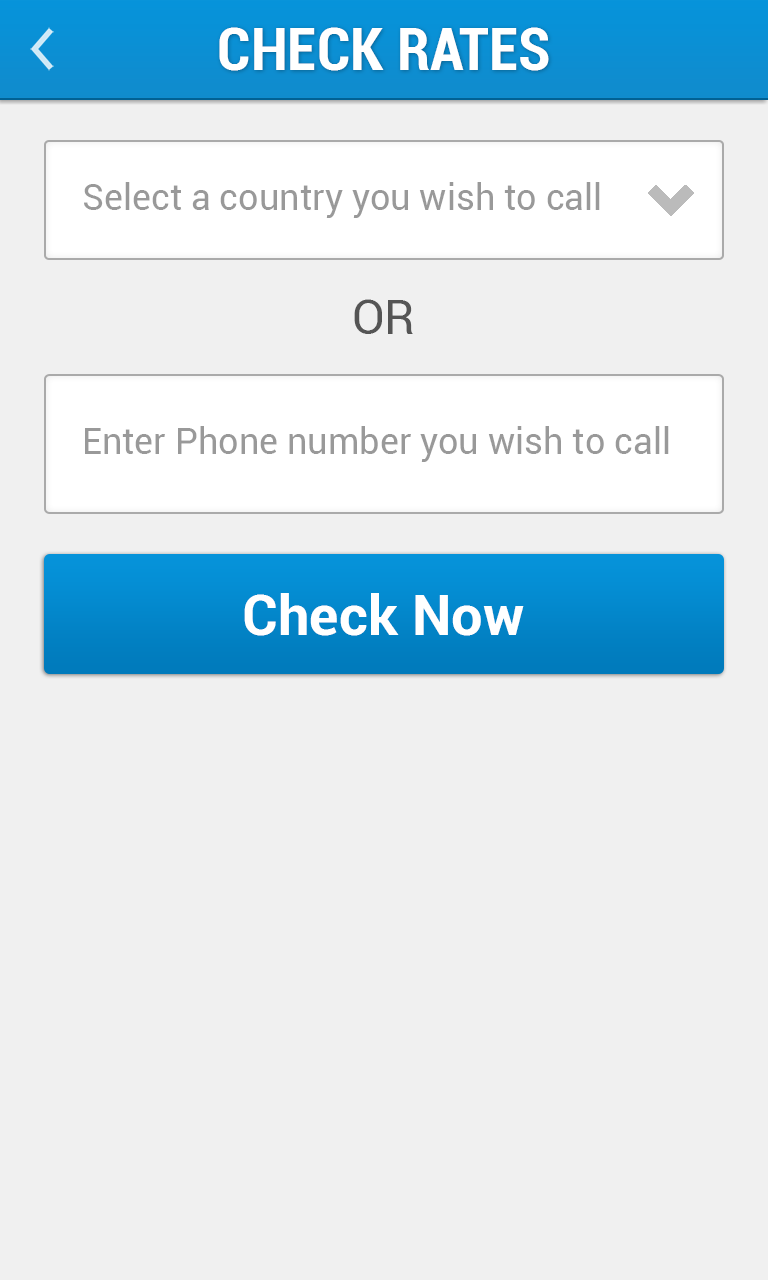
<style>
.page{position:relative;width:768px;height:1280px;background:#f0f0f0}
.page>*{position:absolute;margin:0}
.t1{font:60px "Roboto-BoldCondensed";color:#ffffff}
.t2{font:36px "Roboto-Regular";color:#999999}
.t3{font:48px "Roboto-Regular";color:#555555}
.t4{font:56px "Roboto-Bold";color:#ffffff}
</style>
<div class="page">
<p class="t1" style="left:219px;top:27px;width:330px;height:44px">CHECK RATES</p>
<p class="t2" style="left:84px;top:182px;width:516px;height:36px">Select a country you wish to call</p>
<p class="t3" style="left:354px;top:299px;width:59px;height:35px">OR</p>
<p class="t2" style="left:85px;top:426px;width:584px;height:36px">Enter Phone number you wish to call</p>
<p class="t4" style="left:244px;top:593px;width:280px;height:43px">Check Now</p>
</div>
